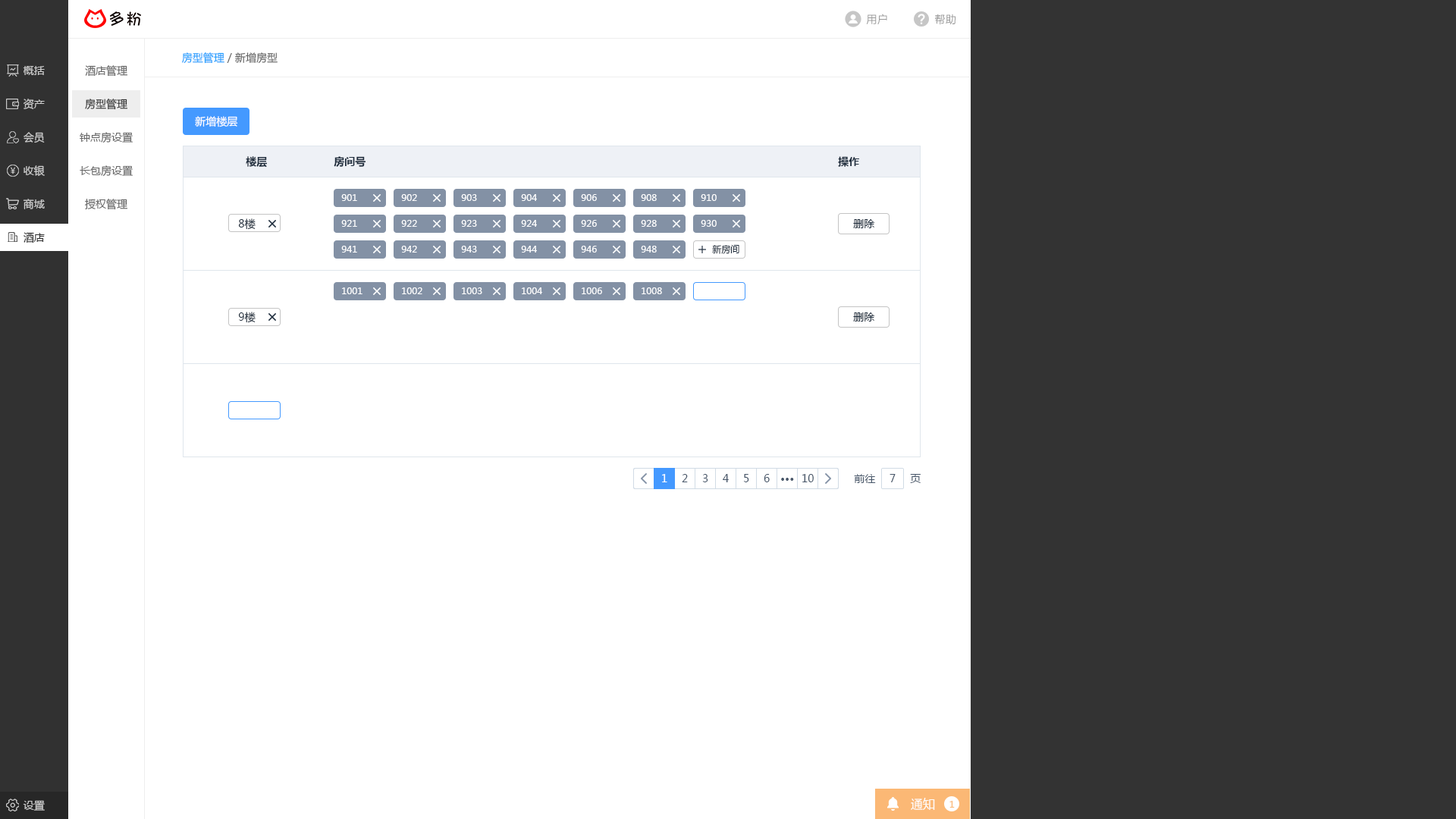
<style>
.page{position:relative;width:1456px;height:819px;background:#ffffff}
.page>*{position:absolute;margin:0}
.t1{font:10.6px "MicrosoftYaHei";letter-spacing:0.025em;color:#999999}
.t2{font:10.6px "MicrosoftYaHei";color:#666666}
.t3{font:10.6px "MicrosoftYaHei";color:#20a0ff}
.t4{font:10.6px "MicrosoftYaHei";color:#cccccc}
.t5{font:10.6px "MicrosoftYaHei";color:#333333}
.t6{font:10.6px "MicrosoftYaHei";color:#ffffff}
.t7{font:10.6px "MicrosoftYaHei-Bold";color:#1f2d3d}
.t8{font:9.1px "MicrosoftYaHei";color:#ffffff}
.t9{font:10.6px "MicrosoftYaHei";color:#1f2d3d}
.t10{font:10.6px "MicrosoftYaHei";color:#313131}
.t11{font:9.1px "MicrosoftYaHei";color:#1f2d3d}
.t12{font:10.6px "MicrosoftYaHei";color:#48576a}
.t13{font:10.6px "MicrosoftYaHei-Bold";color:#48576a}
.t14{font:12.1px "MicrosoftYaHei";color:#ffffff}
.t15{font:9.1px "MicrosoftYaHei";color:#fbb875}
</style>
<div class="page">
<p class="t1" style="left:866px;top:14px;width:21px;height:11px">用户</p>
<p class="t1" style="left:935px;top:14px;width:20px;height:11px">帮助</p>
<p class="t2" style="left:182px;top:52px;width:96px;height:12px"><span class="t3">房型管理</span> / 新增房型</p>
<p class="t4" style="left:23px;top:66px;width:22px;height:9px">概括</p>
<p class="t2" style="left:85px;top:65px;width:42px;height:12px">酒店管理</p>
<p class="t4" style="left:24px;top:99px;width:21px;height:10px">资产</p>
<p class="t5" style="left:85px;top:99px;width:42px;height:11px">房型管理</p>
<p class="t6" style="left:195px;top:116px;width:43px;height:11px">新增楼层</p>
<p class="t4" style="left:24px;top:132px;width:21px;height:11px">会员</p>
<p class="t2" style="left:80px;top:132px;width:53px;height:11px">钟点房设置</p>
<p class="t7" style="left:246px;top:156px;width:21px;height:12px">楼层</p>
<p class="t7" style="left:334px;top:156px;width:32px;height:11px">房间号</p>
<p class="t7" style="left:838px;top:156px;width:21px;height:11px">操作</p>
<p class="t4" style="left:24px;top:165px;width:21px;height:11px">收银</p>
<p class="t2" style="left:80px;top:165px;width:53px;height:12px">长包房设置</p>
<p class="t8" style="left:341px;top:194px;width:16px;height:7px">901</p>
<p class="t8" style="left:401px;top:194px;width:16px;height:7px">902</p>
<p class="t8" style="left:461px;top:194px;width:16px;height:7px">903</p>
<p class="t8" style="left:521px;top:194px;width:16px;height:7px">904</p>
<p class="t8" style="left:581px;top:194px;width:16px;height:7px">906</p>
<p class="t8" style="left:641px;top:194px;width:16px;height:7px">908</p>
<p class="t8" style="left:701px;top:194px;width:16px;height:7px">910</p>
<p class="t4" style="left:23px;top:199px;width:22px;height:10px">商城</p>
<p class="t2" style="left:85px;top:199px;width:42px;height:11px">授权管理</p>
<p class="t9" style="left:238px;top:218px;width:18px;height:12px">8楼</p>
<p class="t8" style="left:341px;top:220px;width:16px;height:7px">921</p>
<p class="t8" style="left:401px;top:220px;width:16px;height:7px">922</p>
<p class="t8" style="left:461px;top:220px;width:16px;height:7px">923</p>
<p class="t8" style="left:521px;top:220px;width:16px;height:7px">924</p>
<p class="t8" style="left:581px;top:220px;width:16px;height:7px">926</p>
<p class="t8" style="left:641px;top:220px;width:16px;height:7px">928</p>
<p class="t8" style="left:701px;top:220px;width:16px;height:7px">930</p>
<p class="t9" style="left:853px;top:219px;width:22px;height:9px">删除</p>
<p class="t10" style="left:24px;top:232px;width:21px;height:11px">酒店</p>
<p class="t8" style="left:341px;top:246px;width:16px;height:7px">941</p>
<p class="t8" style="left:401px;top:246px;width:16px;height:7px">942</p>
<p class="t8" style="left:461px;top:246px;width:16px;height:7px">943</p>
<p class="t8" style="left:521px;top:246px;width:16px;height:7px">944</p>
<p class="t8" style="left:581px;top:246px;width:16px;height:7px">946</p>
<p class="t8" style="left:641px;top:246px;width:16px;height:7px">948</p>
<p class="t11" style="left:712px;top:245px;width:27px;height:9px">新房间</p>
<p class="t8" style="left:342px;top:287px;width:20px;height:7px">1001</p>
<p class="t8" style="left:402px;top:287px;width:20px;height:7px">1002</p>
<p class="t8" style="left:462px;top:287px;width:20px;height:7px">1003</p>
<p class="t8" style="left:522px;top:287px;width:20px;height:7px">1004</p>
<p class="t8" style="left:582px;top:287px;width:20px;height:7px">1006</p>
<p class="t8" style="left:642px;top:287px;width:20px;height:7px">1008</p>
<p class="t9" style="left:238px;top:312px;width:18px;height:11px">9楼</p>
<p class="t9" style="left:853px;top:312px;width:22px;height:10px">删除</p>
<p class="t6" style="left:662px;top:474px;width:5px;height:8px">1</p>
<p class="t12" style="left:682px;top:474px;width:6px;height:8px">2</p>
<p class="t12" style="left:702px;top:474px;width:6px;height:8px">3</p>
<p class="t12" style="left:723px;top:474px;width:6px;height:8px">4</p>
<p class="t12" style="left:744px;top:474px;width:5px;height:8px">5</p>
<p class="t12" style="left:764px;top:474px;width:6px;height:8px">6</p>
<p class="t12" style="left:802px;top:474px;width:12px;height:8px">10</p>
<p class="t12" style="left:854px;top:474px;width:22px;height:9px">前往</p>
<p class="t12" style="left:890px;top:474px;width:6px;height:8px">7</p>
<p class="t12" style="left:910px;top:474px;width:11px;height:9px">页</p>
<p class="t13" style="left:781px;top:478px;width:13px;height:3px">···</p>
<p class="t14" style="left:911px;top:798px;width:24px;height:12px">通知</p>
<p class="t4" style="left:23px;top:800px;width:22px;height:11px">设置</p>
<p class="t15" style="left:949px;top:801px;width:6px;height:7px">1</p>
</div>
